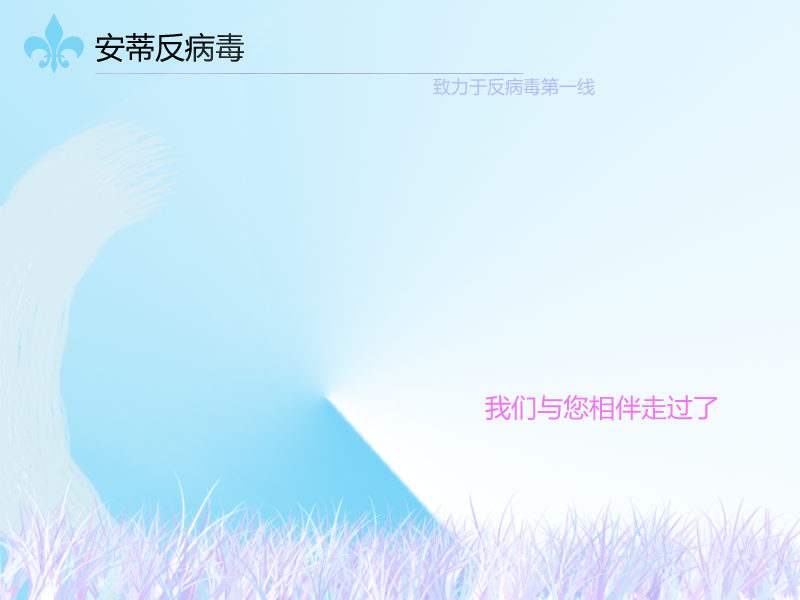
<style>
.page{position:relative;width:800px;height:600px}
.page>*{position:absolute;margin:0}
.t1{font:30px "MicrosoftYaHei";color:#020303}
.t2{font:18px "MicrosoftYaHei";color:#b4b9fa}
.t3{font:26px "MicrosoftYaHei";color:#f474f6}
</style>
<div class="page">
<p class="t1" style="left:95px;top:32px;width:149px;height:30px">安蒂反病毒</p>
<p class="t2" style="left:433px;top:77px;width:162px;height:19px">致力于反病毒第一线</p>
<p class="t3" style="left:485px;top:394px;width:232px;height:27px">我们与您相伴走过了</p>
</div>
